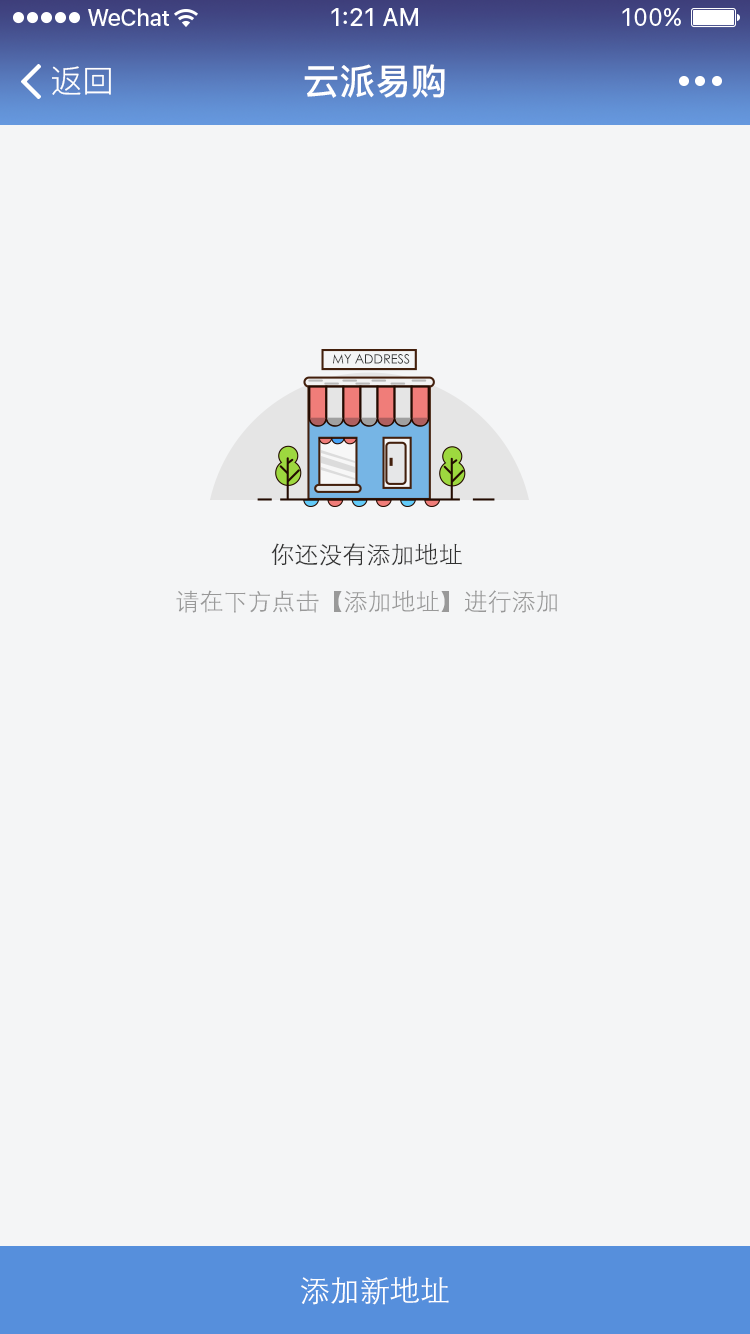
<style>
.page{position:relative;width:750px;height:1334px;background:#f4f5f6}
.page>*{position:absolute;margin:0}
.t1{font:36px "PingFang-SC-Bold";color:#ffffff}
.t2{font:32px "PingFang-SC-Regular";color:#ffffff}
.t3{font:12.7px "STXihei";color:#333333;text-transform:uppercase}
.t4{font:24px "STXihei";color:#333333}
.t5{font:24px "STXihei";color:#999999}
.t6{font:30px "STXihei";color:#ffffff}
</style>
<div class="page">
<p class="t1" style="left:304px;top:64px;width:141px;height:34px">云派易购</p>
<p class="t2" style="left:52px;top:66px;width:59px;height:29px">返回</p>
<p class="t3" style="left:333px;top:353px;width:77px;height:11px">My address</p>
<p class="t4" style="left:271px;top:543px;width:191px;height:23px">你还没有添加地址</p>
<p class="t5" style="left:176px;top:590px;width:381px;height:23px">请在下方点击【添加地址】进行添加</p>
<p class="t6" style="left:301px;top:1276px;width:148px;height:29px">添加新地址</p>
</div>
